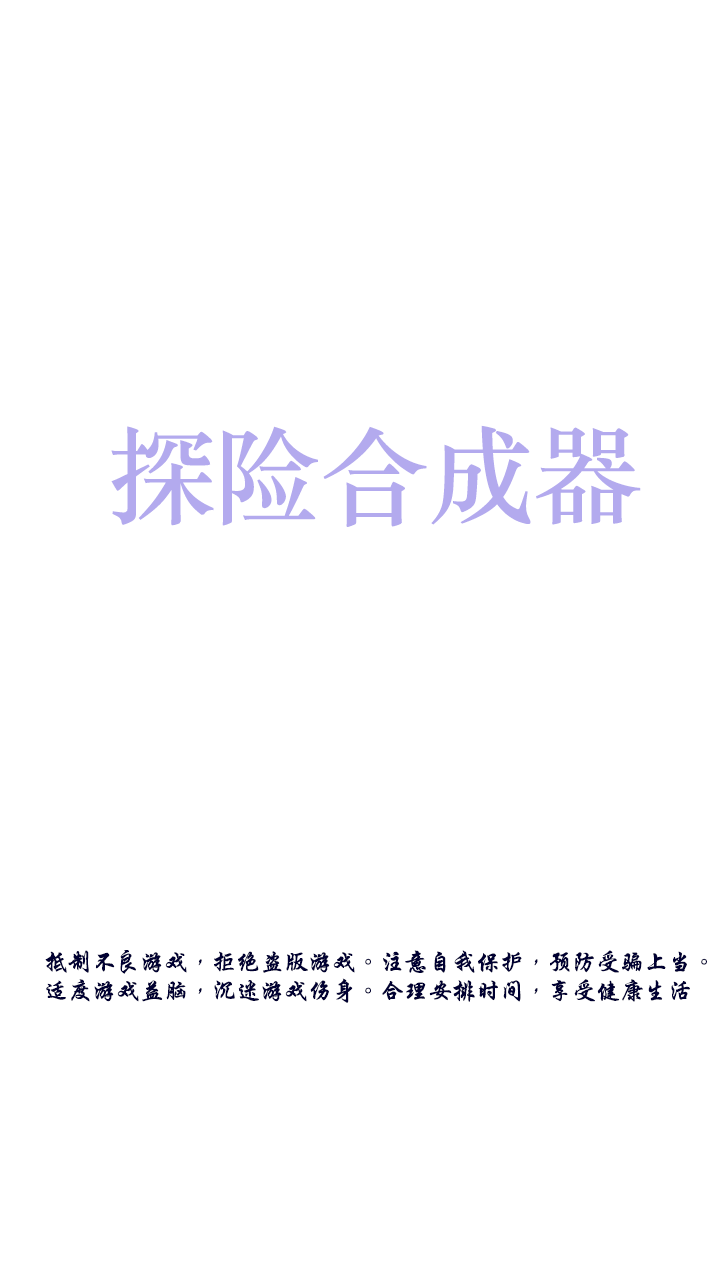
<style>
.page{position:relative;width:720px;height:1279px;background:#ffffff}
.page>*{position:absolute;margin:0}
.t1{font:106.7px "STSongti-TC-Bold";color:#b3aaee}
.t2{font:24px "STXingkaiTC-Bold";color:#000032}
</style>
<div class="page">
<p class="t1" style="left:111px;top:425px;width:530px;height:102px">探险合成器</p>
<p class="t2" style="left:45px;top:950px;width:662px;height:53px;text-align:justify">抵制不良游戏，拒绝盗版游戏。注意自我保护，预防受骗上当。<br>适度游戏益脑，沉迷游戏伤身。合理安排时间，享受健康生活</p>
</div>
